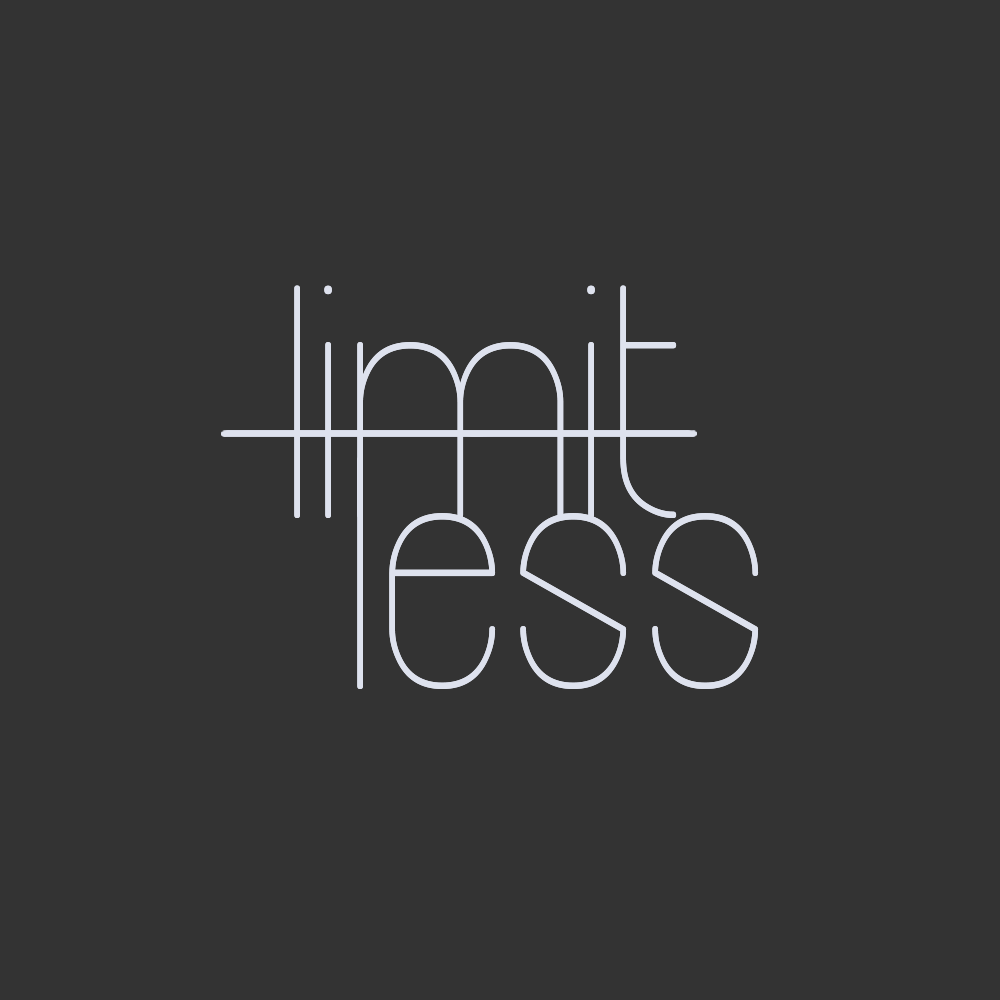
<style>
.page{position:relative;width:1000px;height:1000px;background:#333333}
.page>*{position:absolute;margin:0}
.t1{font:331.9px "Infinity";color:#dee2ee;scale:0.89 1}
</style>
<div class="page">
<p class="t1" style="left:294px;top:285px;width:383px;height:233px">limit</p>
<p class="t1" style="left:357px;top:456px;width:402px;height:233px">less</p>
</div>
